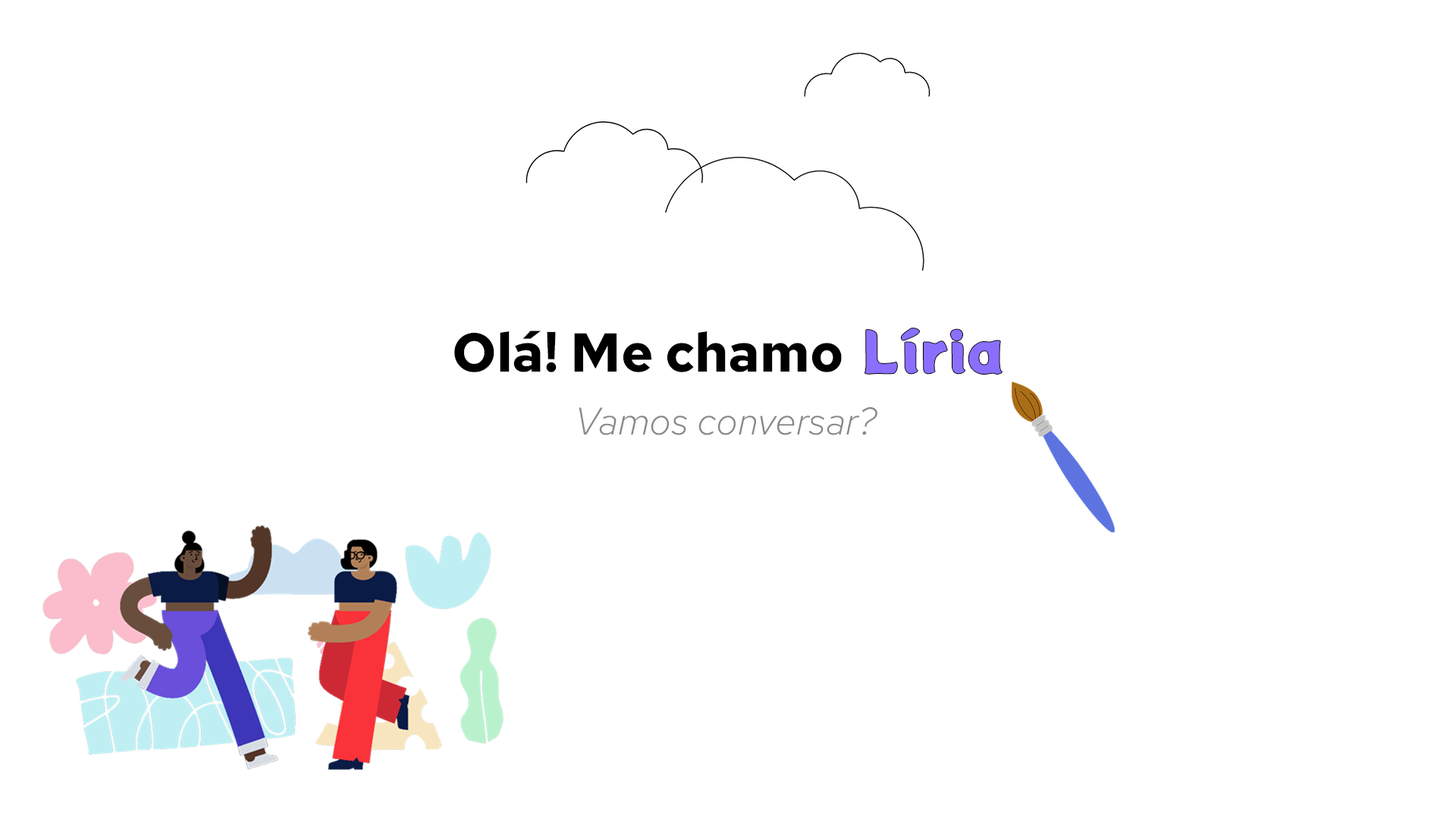
<style>
.page{position:relative;width:1456px;height:819px;background:#ffffff}
.page>*{position:absolute;margin:0}
.t1{font:54.6px "PottaOne-Regular";color:#8a6ffe}
.t2{font:54.6px "RedHatText-Bold";color:#000000}
.t3{font:38.5px "RedHatTextItalic-LightItalic";color:#888888}
</style>
<div class="page">
<p class="t1" style="left:865px;top:328px;width:137px;height:46px">Líria</p>
<p class="t2" style="left:454px;top:331px;width:388px;height:41px">Olá! Me chamo</p>
<p class="t3" style="left:579px;top:407px;width:298px;height:28px">Vamos conversar?</p>
</div>
